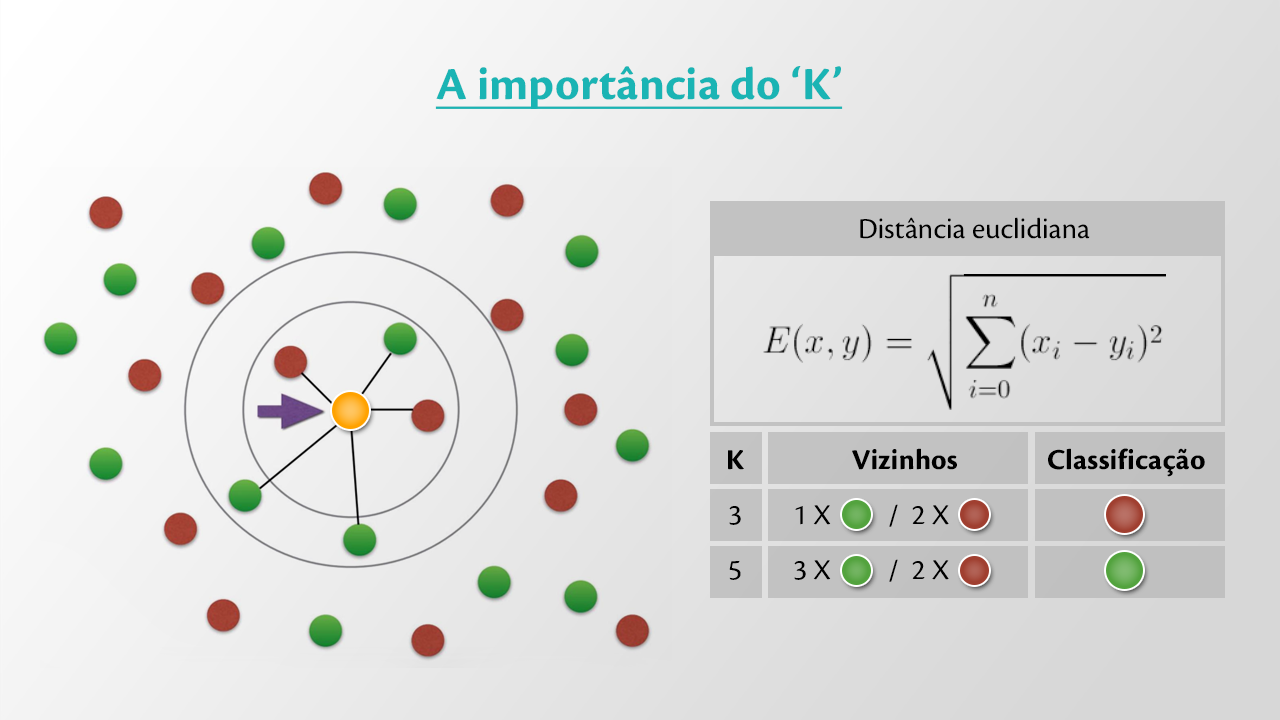
<style>
.page{position:relative;width:1280px;height:720px}
.page>*{position:absolute;margin:0}
.t1{font:47.8px "CronosPro-Bold";color:#1ab4b4;text-decoration:underline}
.t2{font:30px "CronosPro-Regular";color:#000000}
.t3{font:30px/55px "CronosPro-Regular";color:#000000}
.t4{font:30px/55px "CronosPro-Bold";color:#000000}
.t5{font:30px "CronosPro-Bold";color:#000000}
</style>
<div class="page">
<p class="t1" style="left:435px;top:66px;width:408px;height:43px">A importância do ‘K’</p>
<p class="t2" style="left:860px;top:217px;width:230px;height:22px">Distância euclidiana</p>
<p class="t3" style="left:794px;top:448px;width:163px;height:134px;text-align:center"><span class="t4">Vizinhos<br></span>1 X         /  2 X<br>3 X         /  2 X</p>
<p class="t5" style="left:1048px;top:448px;width:157px;height:29px">Classificação</p>
<p class="t3" style="left:728px;top:450px;width:16px;height:130px;text-align:center"><span class="t4">K<br></span>3<br>5</p>
</div>
